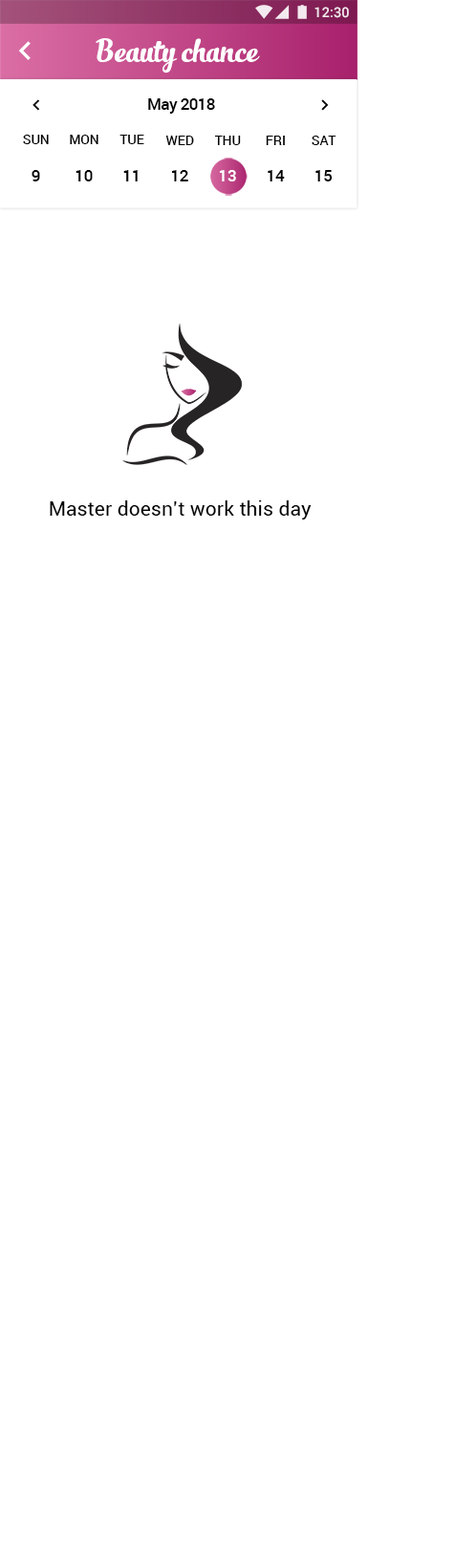
<style>
.page{position:relative;width:455px;height:1568px;background:#ffffff}
.page>*{position:absolute;margin:0}
.t1{font:13.9px "Roboto-Medium";color:#ffffff}
.t2{font:23.8px "SlimTony-Italic";color:#ffffff}
.t3{font:15.8px "Roboto-Medium";letter-spacing:-0.023em;color:#000000}
.t4{font:13.2px "Roboto-Medium";color:#000000}
.t5{font:15.8px "Roboto-Medium";color:#000000}
.t6{font:15.8px "Roboto-Medium";color:#ffffff}
.t7{font:19.8px "Roboto-Regular";letter-spacing:0.01em;color:#000000}
</style>
<div class="page">
<p class="t1" style="left:314px;top:7px;width:35px;height:11px">12:30</p>
<p class="t2" style="left:95px;top:38px;width:165px;height:36px">Beauty chance</p>
<p class="t3" style="left:148px;top:98px;width:67px;height:16px">May 2018</p>
<p class="t4" style="left:23px;top:135px;width:26px;height:9px">SUN</p>
<p class="t4" style="left:70px;top:135px;width:28px;height:9px">MON</p>
<p class="t4" style="left:119px;top:135px;width:25px;height:9px">TUE</p>
<p class="t4" style="left:165px;top:136px;width:29px;height:9px">WED</p>
<p class="t4" style="left:214px;top:136px;width:27px;height:9px">THU</p>
<p class="t4" style="left:265px;top:136px;width:20px;height:9px">FRI</p>
<p class="t4" style="left:311px;top:136px;width:25px;height:9px">SAT</p>
<p class="t5" style="left:32px;top:170px;width:8px;height:11px">9</p>
<p class="t5" style="left:75px;top:170px;width:18px;height:11px">10</p>
<p class="t5" style="left:123px;top:170px;width:15px;height:11px">11</p>
<p class="t5" style="left:171px;top:170px;width:17px;height:11px">12</p>
<p class="t6" style="left:219px;top:170px;width:17px;height:11px">13</p>
<p class="t5" style="left:267px;top:170px;width:18px;height:11px">14</p>
<p class="t5" style="left:315px;top:170px;width:17px;height:11px">15</p>
<p class="t7" style="left:50px;top:500px;width:261px;height:19px">Master doesn’t work this day</p>
</div>
